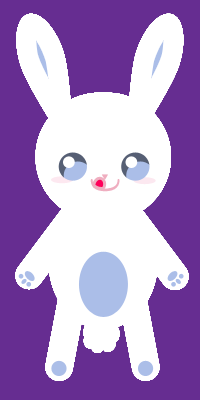
<style>
.page{position:relative;width:200px;height:400px;background:#662d91}
.page>*{position:absolute;margin:0}
.t1{font:36px "QuicksandBook-Regular";color:#efaec0;scale:1.37 1}
</style>
<div class="page">
<p class="t1" style="left:90px;top:179px;width:30px;height:13px;rotate:90deg">)</p>
<p class="t1" style="left:90px;top:179px;width:30px;height:13px;rotate:90deg">)</p>
<p class="t1" style="left:90px;top:179px;width:30px;height:13px;rotate:90deg">)</p>
<p class="t1" style="left:90px;top:179px;width:30px;height:13px;rotate:90deg">)</p>
<p class="t1" style="left:90px;top:179px;width:30px;height:13px;rotate:90deg">)</p>
<p class="t1" style="left:90px;top:179px;width:30px;height:13px;rotate:90deg">)</p>
<p class="t1" style="left:90px;top:179px;width:30px;height:13px;rotate:90deg">)</p>
<p class="t1" style="left:90px;top:179px;width:30px;height:13px;rotate:90deg">)</p>
<p class="t1" style="left:90px;top:179px;width:30px;height:13px;rotate:90deg">)</p>
<p class="t1" style="left:90px;top:179px;width:30px;height:13px;rotate:90deg">)</p>
<p class="t1" style="left:90px;top:179px;width:30px;height:13px;rotate:90deg">)</p>
<p class="t1" style="left:90px;top:179px;width:30px;height:13px;rotate:90deg">)</p>
<p class="t1" style="left:90px;top:179px;width:30px;height:13px;rotate:90deg">)</p>
<p class="t1" style="left:90px;top:179px;width:30px;height:13px;rotate:90deg">)</p>
<p class="t1" style="left:90px;top:179px;width:30px;height:13px;rotate:90deg">)</p>
<p class="t1" style="left:90px;top:179px;width:30px;height:13px;rotate:90deg">)</p>
<p class="t1" style="left:90px;top:179px;width:30px;height:13px;rotate:90deg">)</p>
<p class="t1" style="left:90px;top:179px;width:30px;height:13px;rotate:90deg">)</p>
<p class="t1" style="left:90px;top:179px;width:30px;height:13px;rotate:90deg">)</p>
<p class="t1" style="left:90px;top:179px;width:30px;height:13px;rotate:90deg">)</p>
<p class="t1" style="left:90px;top:179px;width:30px;height:13px;rotate:90deg">)</p>
<p class="t1" style="left:90px;top:179px;width:30px;height:13px;rotate:90deg">)</p>
<p class="t1" style="left:90px;top:179px;width:30px;height:13px;rotate:90deg">)</p>
<p class="t1" style="left:90px;top:179px;width:30px;height:13px;rotate:90deg">)</p>
</div>
